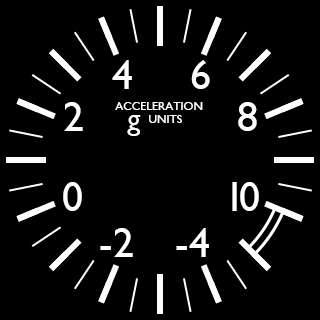
<style>
.page{position:relative;width:320px;height:320px;background:#000000}
.page>*{position:absolute;margin:0}
.t1{font:42px "GillSansMT";color:#ffffff}
.t2{font:12px/12px "GillSansMT";color:#ffffff}
.t3{font:12px/13px "GillSansMT";color:#ffffff}
.t4{font:30px "GillSansMT";color:#ffffff}
.t5{font:42px "GillSansMT";letter-spacing:-0.14em;color:#ffffff}
</style>
<div class="page">
<p class="t1" style="left:112px;top:60px;width:20px;height:29px">4</p>
<p class="t1" style="left:191px;top:60px;width:19px;height:29px">6</p>
<p class="t1" style="left:64px;top:102px;width:19px;height:29px">2</p>
<p class="t2" style="left:115px;top:102px;width:88px;height:21px">ACCELERATION<br>     <span class="t3">UNITS</span></p>
<p class="t1" style="left:238px;top:102px;width:19px;height:29px">8</p>
<p class="t4" style="left:127px;top:115px;width:14px;height:21px">g</p>
<p class="t1" style="left:63px;top:182px;width:19px;height:29px">0</p>
<p class="t5" style="left:232px;top:182px;width:27px;height:29px">10</p>
<p class="t1" style="left:100px;top:228px;width:33px;height:29px">-2</p>
<p class="t1" style="left:176px;top:228px;width:33px;height:29px">-4</p>
</div>
